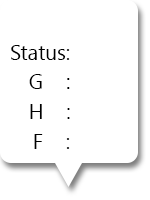
<style>
.page{position:relative;width:150px;height:200px;background:#ffffff}
.page>*{position:absolute;margin:0}
.t1{font:20.8px "LaoUI";color:#000000}
</style>
<div class="page">
<p class="t1" style="left:11px;top:45px;width:59px;height:15px">Status:</p>
<p class="t1" style="left:29px;top:74px;width:41px;height:15px">G    :</p>
<p class="t1" style="left:30px;top:104px;width:40px;height:15px">H    :</p>
<p class="t1" style="left:34px;top:134px;width:36px;height:15px">F    :</p>
</div>
